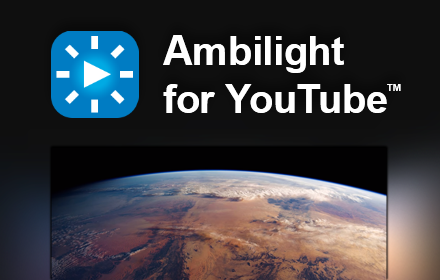
<style>
.page{position:relative;width:440px;height:280px;background:#0f0f0f}
.page>*{position:absolute;margin:0}
.t1{font:40px/48px "Arial-BoldMT";letter-spacing:-0.007em;color:#ffffff}
.t2{font:40.7px/48px "Arial-BoldMT";letter-spacing:-0.007em;color:#ffffff}
.t3{font:40px/48px "Arial-BoldMT";letter-spacing:-0.051em;color:#ffffff}
.t4{font:16.5px/28px "Arial-BoldMT";color:#ffffff}
</style>
<div class="page">
<p class="t1" style="left:163px;top:35px;width:238px;height:78px"><span class="t2">A</span>mbilight<br>for YouTub<span class="t3">e</span><span class="t4">™</span></p>
</div>
